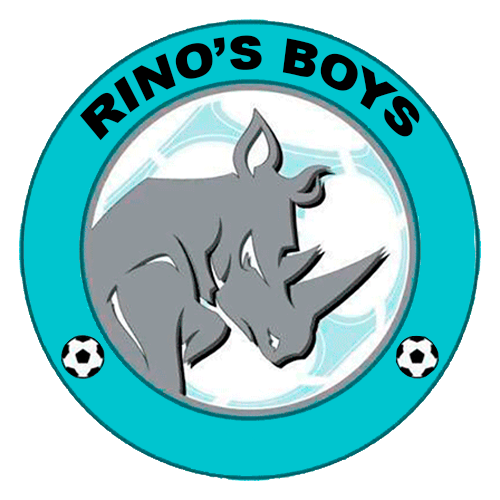
<style>
.page{position:relative;width:500px;height:500px;background:#ffffff}
.page>*{position:absolute;margin:0}
.t1{font:46.9px "Arial-Black";color:#000000;scale:0.86 1}
</style>
<div class="page">
<p class="t1" style="left:80px;top:35px;width:340px;height:106px">RINO’S BOYS</p>
</div>
